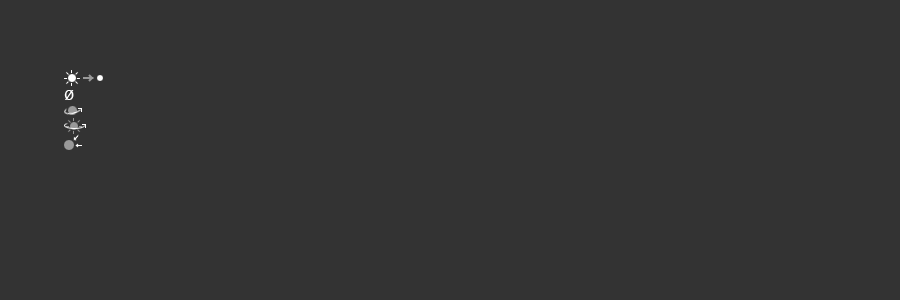
<style>
.page{position:relative;width:900px;height:300px;background:#333333}
.page>*{position:absolute;margin:0}
.t1{font:14px "TrebuchetMS";color:#ffffff}
</style>
<div class="page">
<p class="t1" style="left:64px;top:90px;width:10px;height:10px">Ø</p>
</div>
